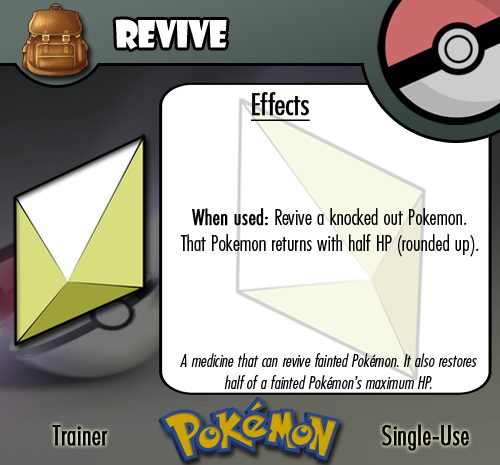
<style>
.page{position:relative;width:500px;height:465px;background:#ffffff}
.page>*{position:absolute;margin:0}
.t1{font:36.7px "ShowcardGothic-Reg";letter-spacing:-0.025em;color:#ffffff;scale:0.91 1}
.t2{font:22.2px "FuturaCondensedBQ-Light";color:#010101}
.t3{font:27.8px "FuturaCondensedBQ-Light";color:#010101;font-weight:bold}
.t4{font:30.6px "FuturaCondensedBQ-Light";color:#010101;font-weight:bold;text-decoration:underline}
.t5{font:22.2px "FuturaCondensedBQ-Light";color:#010101;font-weight:bold}
.t6{font:18.1px "FuturaCondensedBQ-Light";color:#010101;font-style:italic}
</style>
<div class="page">
<p class="t1" style="left:115px;top:19px;width:112px;height:31px">Revive</p>
<p class="t2" style="left:180px;top:92px;width:299px;height:165px"><span class="t3">  </span><span class="t4">Effects<br><br><br><br><br><br><br></span><span class="t5">When used: </span>Revive a knocked out Pokemon. That Pokemon returns with half HP (rounded up).</p>
<p class="t6" style="left:180px;top:353px;width:297px;height:36px;text-align:center">A medicine that can revive fainted Pokémon. It also restores half of a fainted Pokémon’s maximum HP.</p>
<p class="t3" style="left:52px;top:425px;width:55px;height:21px">Trainer</p>
<p class="t3" style="left:382px;top:424px;width:87px;height:27px">Single-Use</p>
</div>
